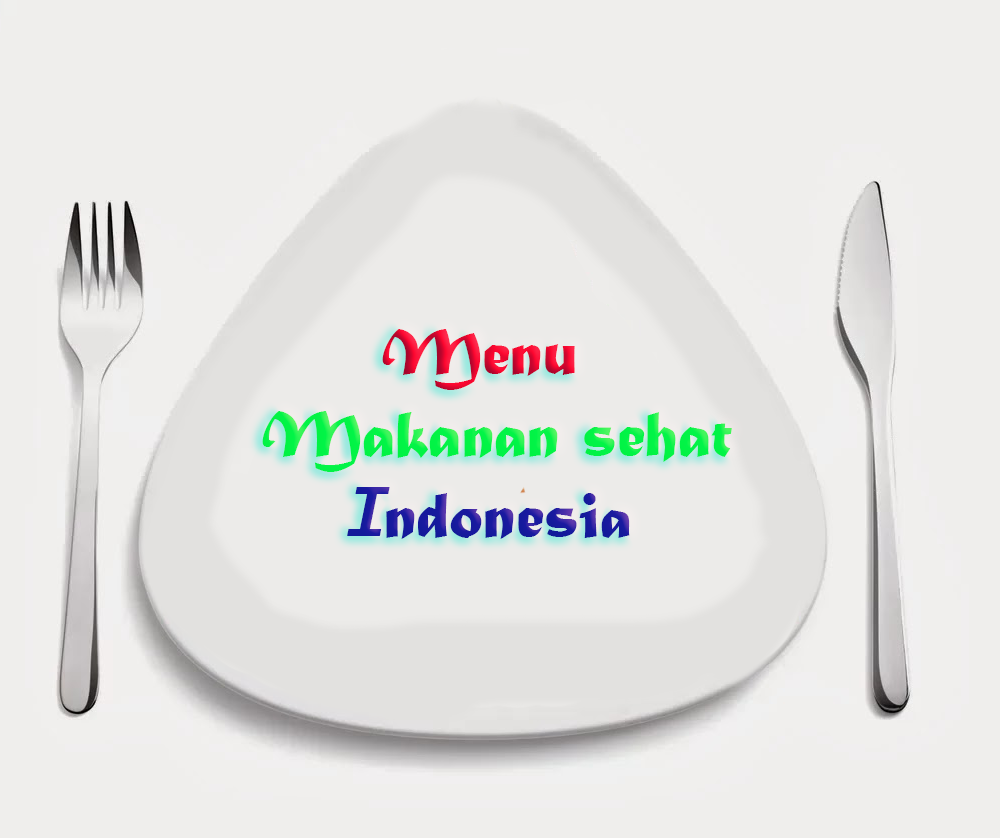
<style>
.page{position:relative;width:1000px;height:838px;background:#efeeec}
.page>*{position:absolute;margin:0}
.t1{font:68px "MaturaMTScriptCapitals";color:#02f447}
.t2{font:12px "MaturaMTScriptCapitals";color:#000000}
.t3{font:68px "MaturaMTScriptCapitals";color:#fd062f}
.t4{font:68px "LucidaSans-TypewriterBoldOblique";color:#1a1aa0}
.t5{font:68px "MaturaMTScriptCapitals";color:#1a1aa0}
.t6{font:65px "MaturaMTScriptCapitals";color:#1a1aa0}
</style>
<div class="page">
<p class="t1" style="left:262px;top:329px;width:470px;height:210px"><span class="t2">         </span><span class="t3">Menu <br>   </span>Makanan sehat<br>      <span class="t4">I</span><span class="t5">ndonesi</span><span class="t6">a</span></p>
</div>
